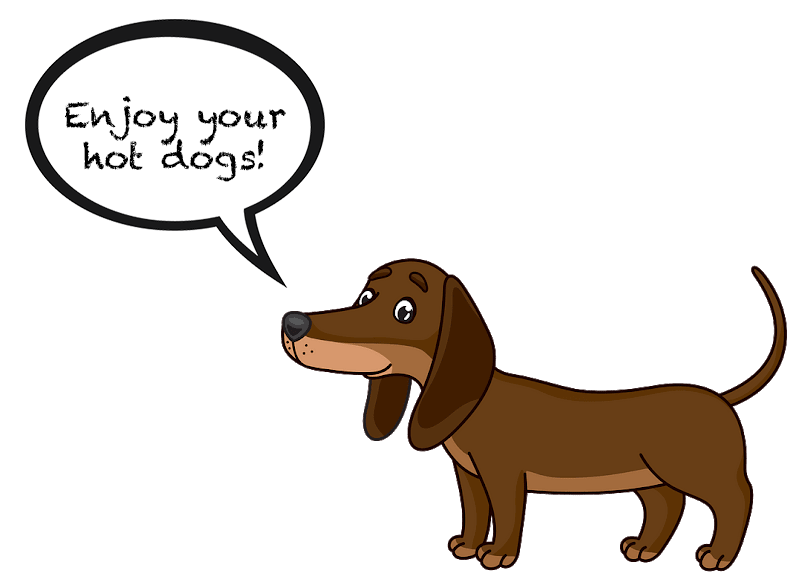
<style>
.page{position:relative;width:792px;height:576px;background:#ffffff}
.page>*{position:absolute;margin:0}
.t1{font:35px "Chalkduster";color:#000000}
</style>
<div class="page">
<p class="t1" style="left:65px;top:96px;width:221px;height:86px;text-align:center">Enjoy your<br>hot dogs!</p>
</div>
